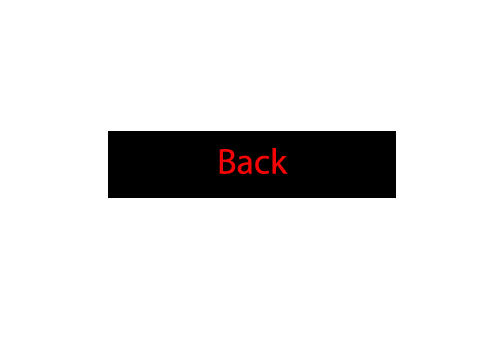
<style>
.page{position:relative;width:504px;height:360px;background:#ffffff}
.page>*{position:absolute;margin:0}
.t1{font:36px "MyriadPro-Regular";color:#f40404}
</style>
<div class="page">
<p class="t1" style="left:219px;top:148px;width:69px;height:26px">Back</p>
</div>
